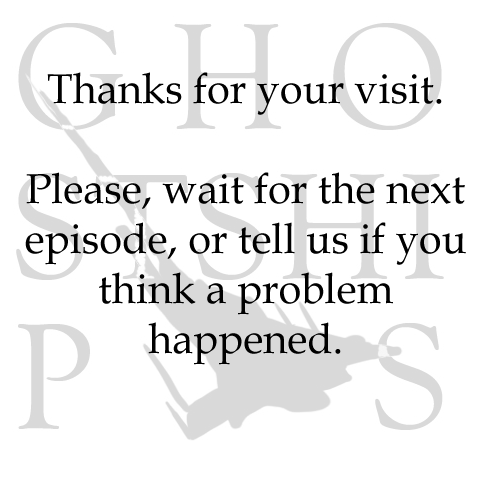
<style>
.page{position:relative;width:500px;height:500px;background:#ffffff}
.page>*{position:absolute;margin:0}
.t1{font:41.7px "BookAntiqua";color:#000000}
</style>
<div class="page">
<p class="t1" style="left:25px;top:72px;width:441px;height:293px;text-align:center">Thanks for your visit. <br><br>Please, wait for the next episode, or tell us if you think a problem <br>happened.</p>
</div>
